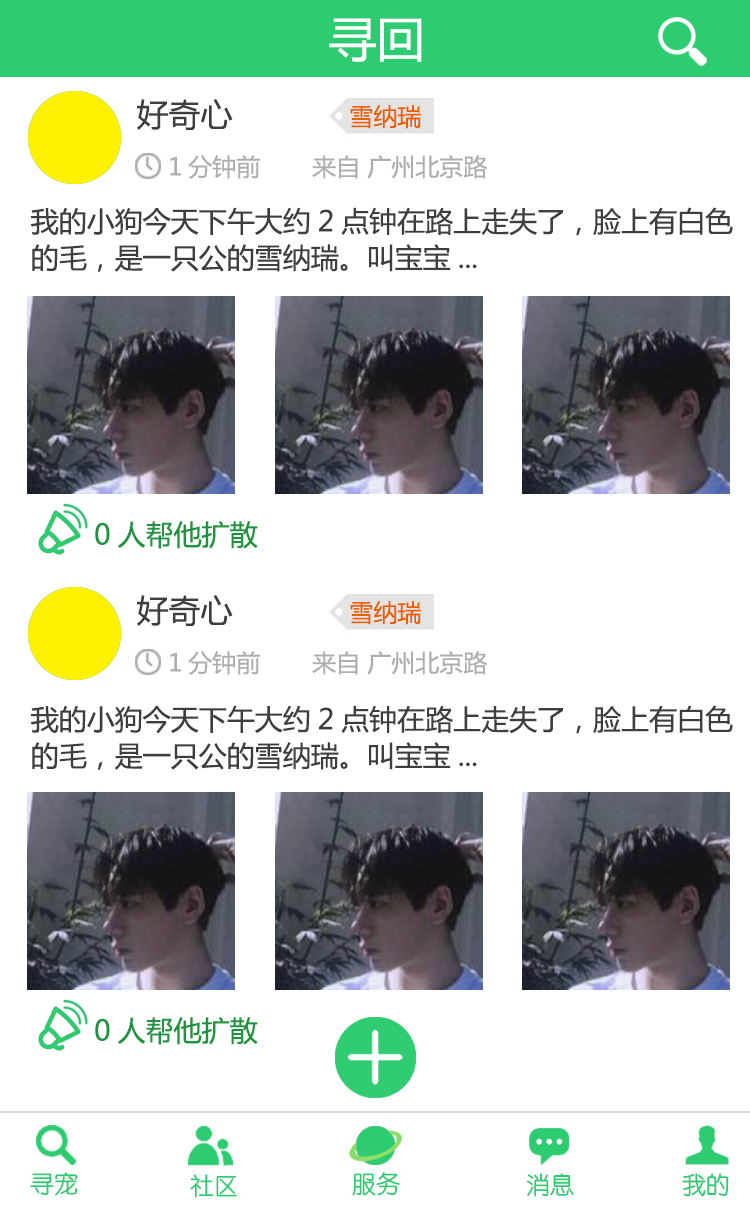
<style>
.page{position:relative;width:750px;height:1206px;background:#ffffff}
.page>*{position:absolute;margin:0}
.t1{font:48px "MicrosoftYaHei";color:#ffffff}
.t2{font:32px "MicrosoftYaHei";color:#3e3e3e}
.t3{font:24px "MicrosoftYaHei";color:#eb6100}
.t4{font:24px "MicrosoftYaHei";color:#adaead}
.t5{font:28px/36.5px "MicrosoftYaHei";color:#3e3e3e}
.t6{font:28px "MicrosoftYaHei";color:#1d953f}
.t7{font:24px "STYuanti-SC-Regular";color:#2ecc71}
.t8{font:24px "STYuanti-SC-Regular"}
</style>
<div class="page">
<p class="t1" style="left:329px;top:18px;width:93px;height:44px">寻回</p>
<p class="t2" style="left:137px;top:99px;width:96px;height:31px">好奇心</p>
<p class="t3" style="left:350px;top:104px;width:72px;height:25px">雪纳瑞</p>
<p class="t4" style="left:170px;top:155px;width:317px;height:24px">1分钟前       来自 广州北京路</p>
<p class="t5" style="left:31px;top:207px;width:702px;height:65px">我的小狗今天下午大约2点钟在路上走失了，脸上有白色<br>的毛，是一只公的雪纳瑞。叫宝宝...</p>
<p class="t6" style="left:95px;top:521px;width:163px;height:28px">0人帮他扩散</p>
<p class="t2" style="left:137px;top:595px;width:96px;height:31px">好奇心</p>
<p class="t3" style="left:350px;top:600px;width:72px;height:25px">雪纳瑞</p>
<p class="t4" style="left:170px;top:651px;width:317px;height:24px">1分钟前       来自 广州北京路</p>
<p class="t5" style="left:31px;top:705px;width:702px;height:65px">我的小狗今天下午大约2点钟在路上走失了，脸上有白色<br>的毛，是一只公的雪纳瑞。叫宝宝...</p>
<p class="t6" style="left:95px;top:1017px;width:163px;height:28px">0人帮他扩散</p>
<p class="t7" style="left:30px;top:1172px;width:48px;height:24px">寻宠</p>
<p class="t7" style="left:190px;top:1174px;width:47px;height:24px">社区</p>
<p class="t8" style="left:352px;top:1173px;width:48px;height:24px">服务</p>
<p class="t7" style="left:352px;top:1172px;width:48px;height:24px">服务</p>
<p class="t8" style="left:526px;top:1173px;width:47px;height:24px">消息</p>
<p class="t7" style="left:527px;top:1173px;width:47px;height:24px">消息</p>
<p class="t7" style="left:682px;top:1173px;width:47px;height:24px">我的</p>
<p class="t7" style="left:682px;top:1173px;width:47px;height:24px">我的</p>
</div>
